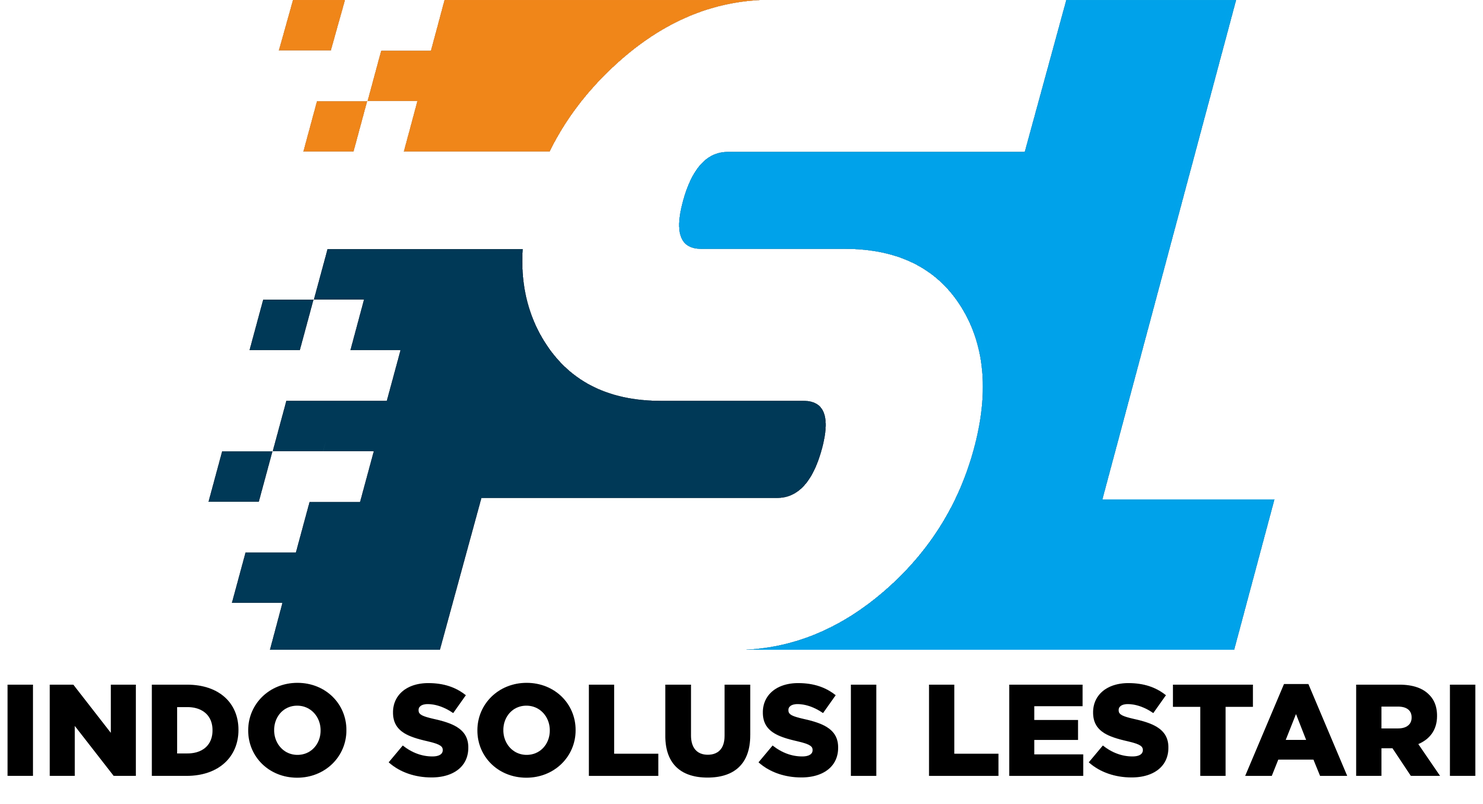
<style>
.page{position:relative;width:1483px;height:804px;background:#ffffff}
.page>*{position:absolute;margin:0}
.t1{font:130.3px "Gotham-Black";color:#000000}
</style>
<div class="page">
<p class="t1" style="left:7px;top:683px;width:1469px;height:95px">INDO SOLUSI LESTARI</p>
</div>
